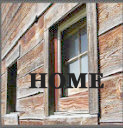
<style>
.page{position:relative;width:123px;height:128px}
.page>*{position:absolute;margin:0}
.t1{font:21.3px "Georgia-Bold";color:#232323;font-weight:bold}
</style>
<div class="page">
<p class="t1" style="left:28px;top:72px;width:76px;height:17px">HOME</p>
</div>
